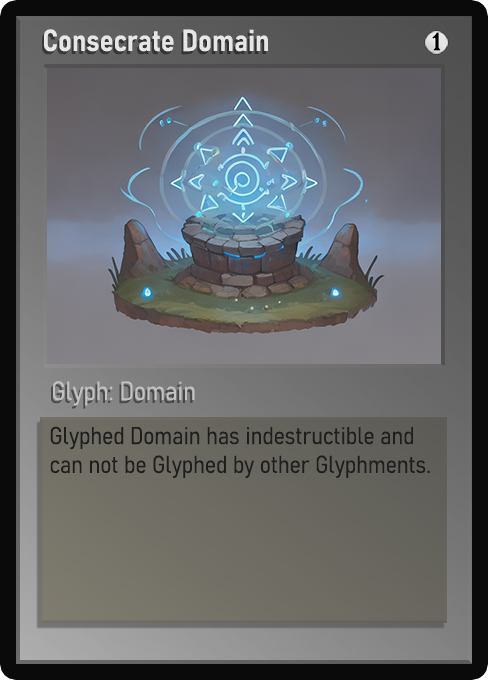
<style>
.page{position:relative;width:488px;height:680px}
.page>*{position:absolute;margin:0}
.t1{font:30px "Bahnschrift-SemiBoldSemiCondensed";color:#f2f2f2;font-weight:bold}
.t2{font:25px "WTRRoycroft";color:#000000;font-weight:bold;scale:1.09 1}
.t3{font:26px "Bahnschrift-LightSemiCondensed";color:#c8c8c8;font-weight:bold}
.t4{font:24px "Bahnschrift-LightSemiCondensed";color:#1e1e1e;font-weight:bold}
</style>
<div class="page">
<p class="t1" style="left:44px;top:29px;width:224px;height:23px;opacity:0.9">Consecrate Domain</p>
<p class="t2" style="left:432px;top:32px;width:9px;height:19px">1</p>
<p class="t3" style="left:53px;top:381px;width:142px;height:25px;opacity:0.9">Glyph: Domain</p>
<p class="t4" style="left:50px;top:426px;width:380px;height:52px">Glyphed Domain has indestructible and can not be Glyphed by other Glyphments.</p>
</div>
